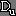
<style>
.page{position:relative;width:16px;height:16px;background:#000000}
.page>*{position:absolute;margin:0}
.t1{font:14px "TimesNewRomanPSMT";color:#fefefe}
.t2{font:10px "TimesNewRomanPSMT";color:#fefefe}
</style>
<div class="page">
<p class="t1" style="left:1px;top:1px;width:9px;height:10px">D</p>
<p class="t2" style="left:9px;top:10px;width:6px;height:5px">u</p>
</div>
